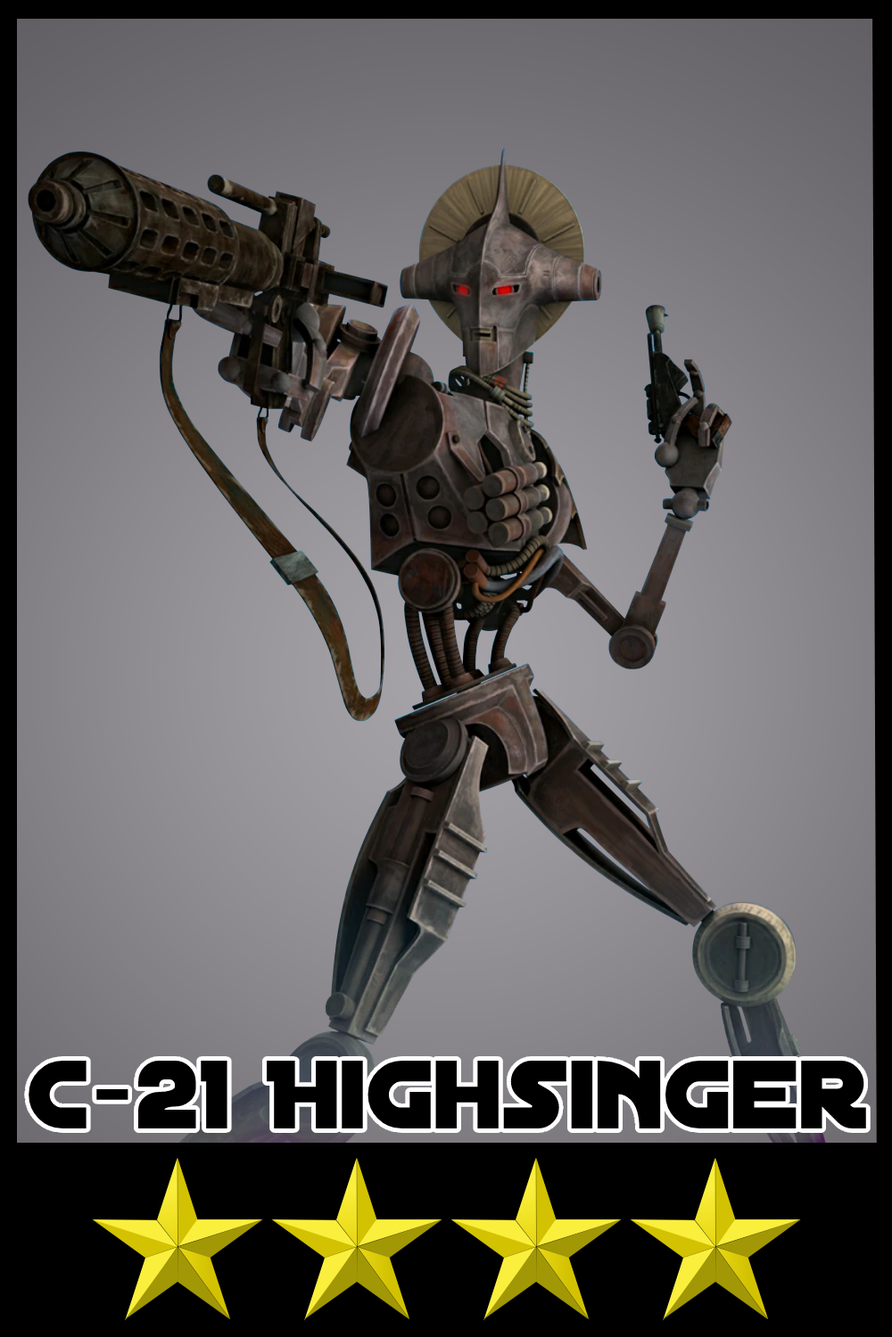
<style>
.page{position:relative;width:892px;height:1337px}
.page>*{position:absolute;margin:0}
.t1{font:104.3px "DistantGalaxy";color:#000000}
</style>
<div class="page">
<p class="t1" style="left:29px;top:1061px;width:837px;height:68px">C-21 Highsinger</p>
</div>
